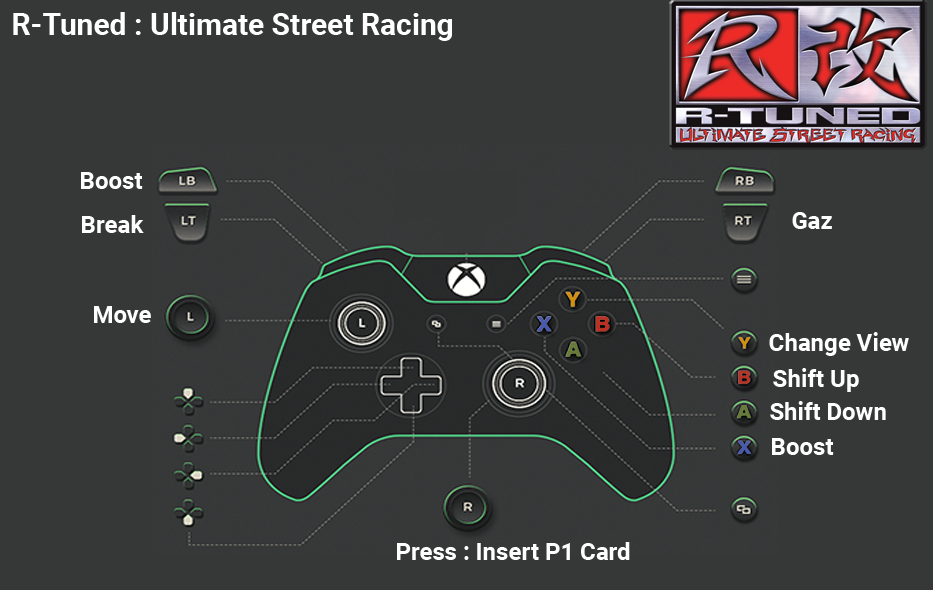
<style>
.page{position:relative;width:933px;height:590px;background:#363838}
.page>*{position:absolute;margin:0}
.t1{font:30px "Roboto-Bold";color:#ffffff}
.t2{font:24px "Roboto-Bold";color:#ffffff}
</style>
<div class="page">
<p class="t1" style="left:13px;top:12px;width:439px;height:29px">R-Tuned : Ultimate Street Racing</p>
<p class="t2" style="left:81px;top:172px;width:62px;height:17px">Boost</p>
<p class="t2" style="left:82px;top:215px;width:62px;height:18px">Break</p>
<p class="t2" style="left:792px;top:212px;width:40px;height:17px">Gaz</p>
<p class="t2" style="left:94px;top:306px;width:57px;height:17px">Move</p>
<p class="t2" style="left:769px;top:332px;width:140px;height:24px">Change View</p>
<p class="t2" style="left:773px;top:368px;width:86px;height:24px">Shift Up</p>
<p class="t2" style="left:770px;top:401px;width:116px;height:19px">Shift Down</p>
<p class="t2" style="left:772px;top:438px;width:62px;height:17px">Boost</p>
<p class="t2" style="left:397px;top:542px;width:233px;height:18px">Press : Insert P1 Card</p>
</div>
